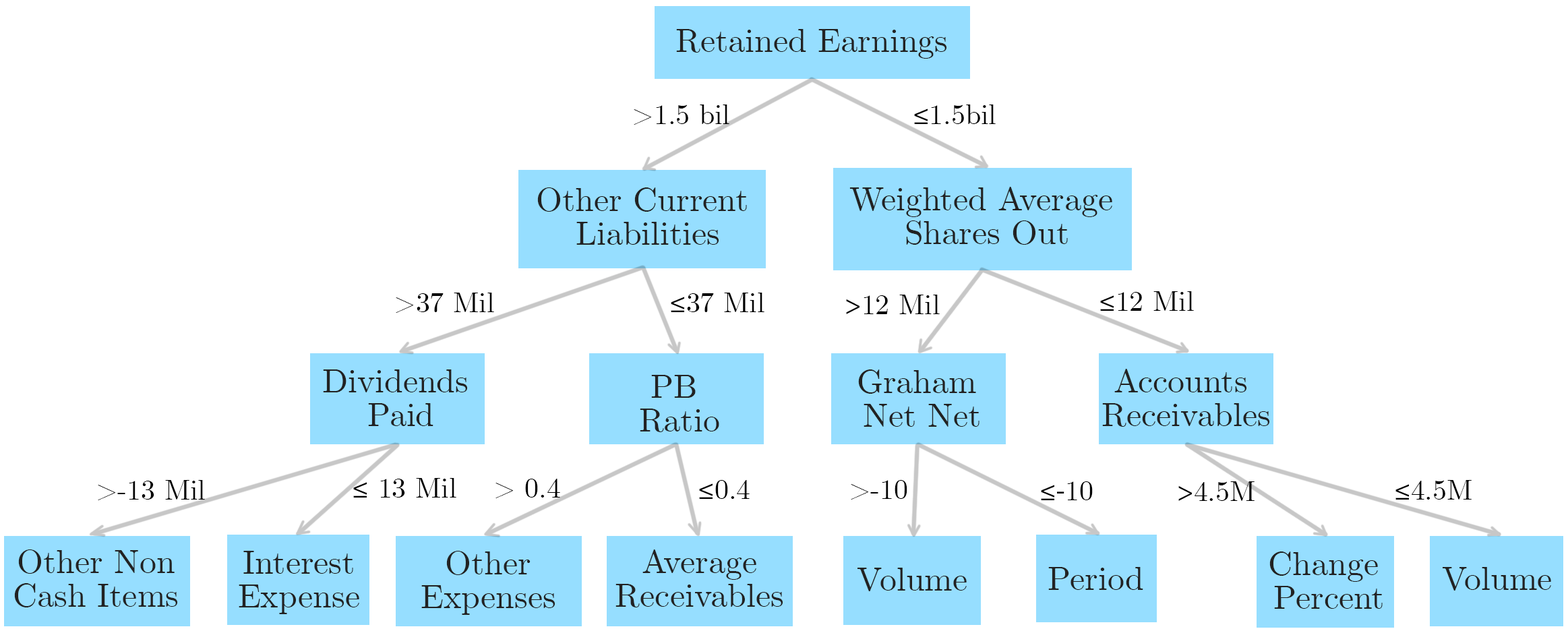
<style>
.page{position:relative;width:1568px;height:629px;background:#ffffff}
.page>*{position:absolute;margin:0}
.t1{font:33.7px "CMUSerif-Roman";color:#222222}
.t2{font:28.1px "CMUSerif-Roman";color:#000000}
.t3{font:28.1px "MyriadPro-Regular";color:#000000}
.t4{font:33.7px/33.7px "CMUSerif-Roman";color:#222222}
</style>
<div class="page">
<p class="t1" style="left:676px;top:29px;width:270px;height:30px">Retained Earnings</p>
<p class="t2" style="left:634px;top:104px;width:95px;height:21px">&gt;1.5 bil</p>
<p class="t2" style="left:914px;top:104px;width:82px;height:20px"><span class="t3">≤</span>1.5bil</p>
<p class="t4" style="left:537px;top:187px;width:210px;height:58px;text-align:center">Other Current <br>Liabilities</p>
<p class="t4" style="left:849px;top:187px;width:263px;height:58px;text-align:center">Weighted Average <br>Shares Out</p>
<p class="t2" style="left:396px;top:293px;width:98px;height:20px">&gt;37 Mil</p>
<p class="t2" style="left:671px;top:293px;width:93px;height:19px"><span class="t3">≤</span>37 Mil</p>
<p class="t2" style="left:1100px;top:291px;width:94px;height:20px"><span class="t3">≤</span>12 Mil</p>
<p class="t2" style="left:846px;top:295px;width:94px;height:19px"><span class="t3">&gt;</span>12 Mil</p>
<p class="t4" style="left:323px;top:369px;width:144px;height:57px;text-align:center">Dividends <br>Paid</p>
<p class="t4" style="left:640px;top:375px;width:79px;height:57px;text-align:center">PB <br>Ratio</p>
<p class="t4" style="left:858px;top:369px;width:121px;height:58px;text-align:center">Graham <br>Net Net</p>
<p class="t4" style="left:1102px;top:369px;width:167px;height:58px;text-align:center">Accounts <br>Receivables</p>
<p class="t2" style="left:98px;top:480px;width:107px;height:20px">&gt;-13 Mil</p>
<p class="t2" style="left:353px;top:478px;width:103px;height:19px"><span class="t3">≤</span> 13 Mil</p>
<p class="t2" style="left:495px;top:479px;width:65px;height:19px">&gt; 0.4</p>
<p class="t2" style="left:699px;top:480px;width:51px;height:19px"><span class="t3">≤</span>0.4</p>
<p class="t2" style="left:851px;top:480px;width:56px;height:20px">&gt;-10</p>
<p class="t3" style="left:1041px;top:481px;width:52px;height:19px">≤-<span class="t2">10</span></p>
<p class="t2" style="left:1178px;top:481px;width:77px;height:20px"><span class="t3">&gt;</span>4.5M</p>
<p class="t2" style="left:1395px;top:480px;width:77px;height:20px"><span class="t3">≤</span>4.5M</p>
<p class="t4" style="left:14px;top:549px;width:163px;height:58px;text-align:center">Other Non<br>Cash Items</p>
<p class="t4" style="left:239px;top:551px;width:120px;height:63px;text-align:center">Interest<br>Expense</p>
<p class="t4" style="left:421px;top:551px;width:134px;height:64px;text-align:center">Other<br>Expenses</p>
<p class="t4" style="left:615px;top:549px;width:168px;height:58px;text-align:center">Average<br>Receivables</p>
<p class="t4" style="left:1269px;top:551px;width:114px;height:58px;text-align:center">Change <br>Percent</p>
<p class="t1" style="left:857px;top:568px;width:110px;height:23px">Volume</p>
<p class="t1" style="left:1048px;top:567px;width:95px;height:23px">Period</p>
<p class="t1" style="left:1443px;top:567px;width:108px;height:24px">Volume</p>
</div>
